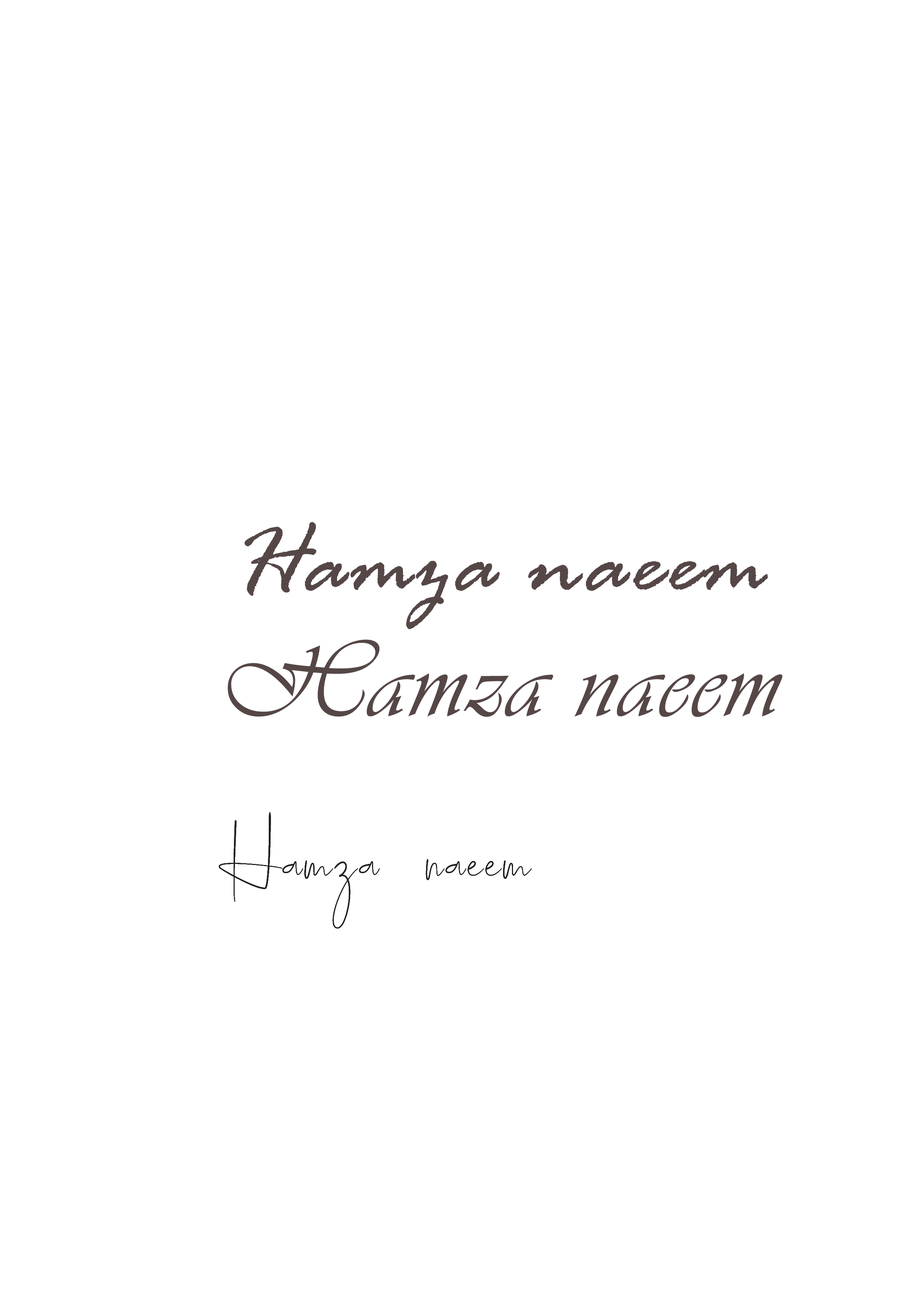
<style>
.page{position:relative;width:918px;height:1299px;background:#ffffff}
.page>*{position:absolute;margin:0}
.t1{font:102.1px "RageItalic";color:#564747;font-weight:bold}
.t2{font:102.1px "Vivaldii";color:#564747;font-weight:bold}
.t3{font:84.8px "Youthness-Regular";color:#231f20;font-weight:bold}
</style>
<div class="page">
<p class="t1" style="left:244px;top:522px;width:524px;height:107px">Hamza naeem</p>
<p class="t2" style="left:228px;top:639px;width:555px;height:78px">Hamza naeem</p>
<p class="t3" style="left:219px;top:812px;width:313px;height:117px">Hamza naeem</p>
<p class="t3" style="left:219px;top:812px;width:313px;height:117px">Hamza naeem</p>
<p class="t3" style="left:219px;top:812px;width:313px;height:117px">Hamza naeem</p>
<p class="t3" style="left:219px;top:812px;width:313px;height:117px">Hamza naeem</p>
<p class="t3" style="left:219px;top:812px;width:313px;height:117px">Hamza naeem</p>
<p class="t3" style="left:219px;top:812px;width:313px;height:117px">Hamza naeem</p>
</div>
